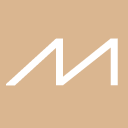
<style>
.page{position:relative;width:128px;height:128px;background:#dab690}
.page>*{position:absolute;margin:0}
.t1{font:93.1px "Cubos-Regular";color:#ffffff;font-weight:bold}
</style>
<div class="page">
<p class="t1" style="left:6px;top:38px;width:112px;height:48px">M</p>
</div>
